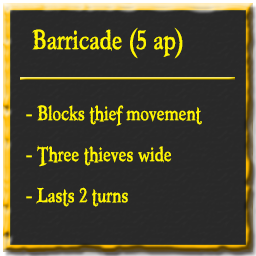
<style>
.page{position:relative;width:256px;height:256px;background:#292929}
.page>*{position:absolute;margin:0}
.t1{font:40px "Booter-ZeroZero";color:#fff600}
.t2{font:30px "Booter-ZeroZero";color:#fff600}
</style>
<div class="page">
<p class="t1" style="left:32px;top:27px;width:151px;height:32px">Barricade (5 ap)</p>
<p class="t2" style="left:26px;top:105px;width:176px;height:21px">- Blocks thief movement</p>
<p class="t2" style="left:26px;top:145px;width:146px;height:22px">- Three thieves wide</p>
<p class="t2" style="left:26px;top:187px;width:102px;height:20px">- Lasts 2 turns</p>
</div>
